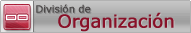
<style>
.page{position:relative;width:191px;height:33px}
.page>*{position:absolute;margin:0}
.t1{font:10px "Verdana";letter-spacing:-0.025em;color:#4b4848;font-weight:bold}
.t2{font:10px "Verdana";letter-spacing:-0.025em;color:#888888;font-weight:bold}
.t3{font:11.6px "911Porscha";color:#ffffff}
.t4{font:18px "Verdana";letter-spacing:-0.025em;color:#881811;font-weight:bold}
.t5{font:18px "Verdana";letter-spacing:-0.025em;font-weight:bold}
</style>
<div class="page">
<p class="t1" style="left:36px;top:4px;width:55px;height:9px">División de</p>
<p class="t2" style="left:37px;top:5px;width:55px;height:9px">División de</p>
<p class="t3" style="left:6px;top:14px;width:22px;height:7px">DO</p>
<p class="t4" style="left:58px;top:12px;width:116px;height:20px">Organización</p>
<p class="t5" style="left:59px;top:13px;width:116px;height:20px">Organización</p>
</div>
